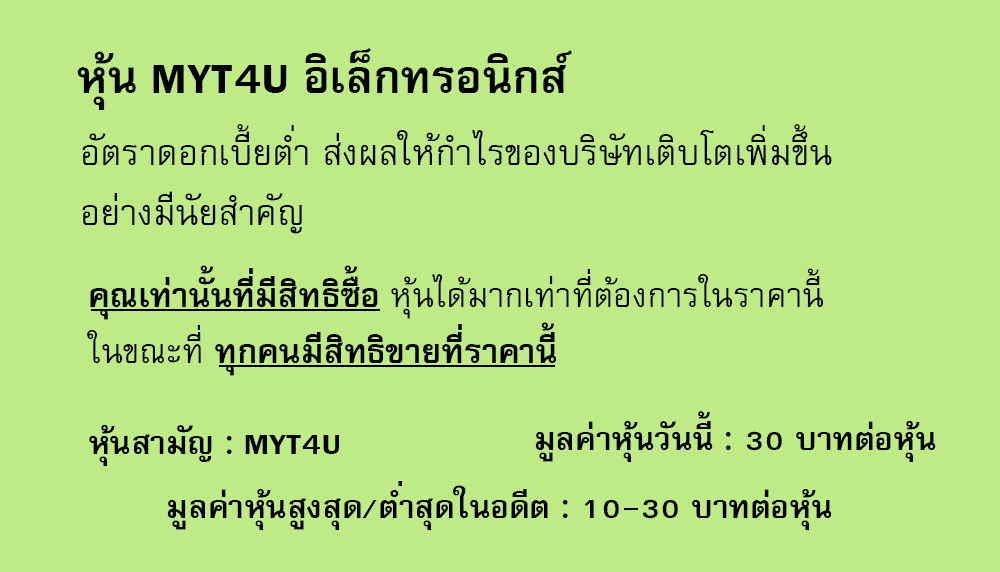
<style>
.page{position:relative;width:1000px;height:572px;background:#beeb85}
.page>*{position:absolute;margin:0}
.t1{font:64px "FreesiaUPCBold";color:#000000}
.t2{font:50px/60px "FreesiaUPC";color:#000000}
.t3{font:47px "FreesiaUPC";color:#000000}
.t4{font:47px "FreesiaUPCBold";color:#000000}
.t5{font:45px "FreesiaUPCBold";color:#000000}
</style>
<div class="page">
<p class="t1" style="left:77px;top:48px;width:495px;height:62px">หุ้น MYT4U อิเล็กทรอนิกส์</p>
<p class="t2" style="left:82px;top:124px;width:750px;height:110px">อัตราดอกเบี้ยต่ำ ส่งผลให้กำไรของบริษัทเติบโตเพิ่มขึ้น<br>อย่างมีนัยสำคัญ</p>
<p class="t3" style="left:87px;top:265px;width:737px;height:111px"><span class="t4">คุณเท่านั้นที่มีสิทธิซื้อ </span>หุ้นได้มากเท่าที่ต้องการในราคานี้<br>ในขณะที่<span class="t4"> ทุกคนมีสิทธิขายที่ราคานี้</span></p>
<p class="t5" style="left:535px;top:411px;width:401px;height:51px">มูลค่าหุ้นวันนี้ : 30 บาทต่อหุ้น</p>
<p class="t5" style="left:89px;top:425px;width:250px;height:41px">หุ้นสามัญ : MYT4U</p>
<p class="t5" style="left:167px;top:481px;width:665px;height:49px">มูลค่าหุ้นสูงสุด/ต่ำสุดในอดีต : 10-30 บาทต่อหุ้น</p>
</div>
